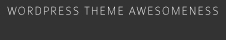
<style>
.page{position:relative;width:226px;height:40px;background:#333333}
.page>*{position:absolute;margin:0}
.t1{font:12px "Colaborate-Thin";letter-spacing:0.09em;color:#ffffff}
</style>
<div class="page">
<p class="t1" style="left:7px;top:6px;width:211px;height:9px">WORDPRESS THEME AWESOMENESS</p>
</div>
